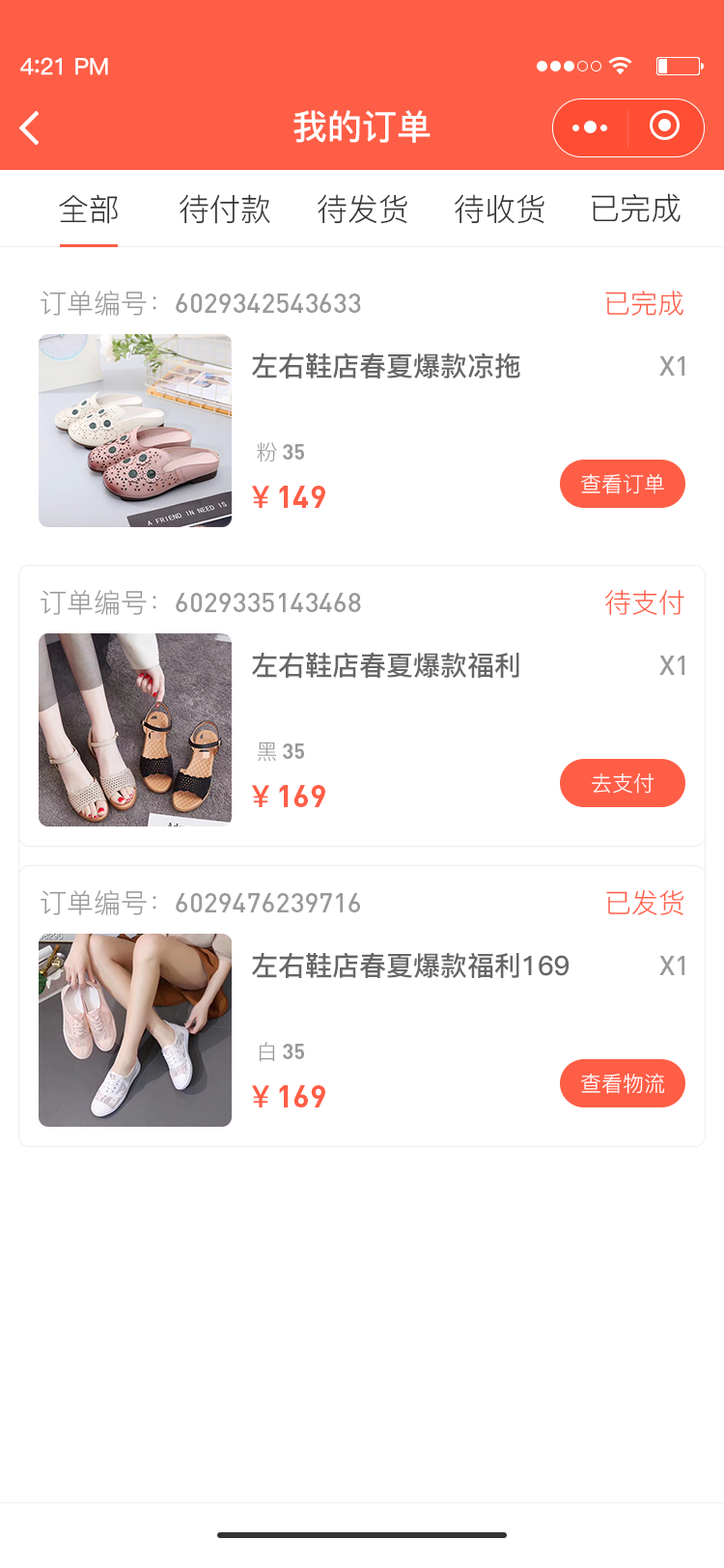
<style>
.page{position:relative;width:724px;height:1568px;background:#ffffff}
.page>*{position:absolute;margin:0}
.t1{font:23.2px "PingFang-SC-Bold";letter-spacing:-0.02em;color:#fefefe}
.t2{font:25.1px "PingFang-SC-Bold";letter-spacing:-0.02em;color:#fefefe}
.t3{font:34.8px "PingFang-SC-Bold";color:#ffffff}
.t4{font:30.9px "PingFang-SC-Regular";color:#333333}
.t5{font:27px "DIN-Medium";color:#999999}
.t6{font:27px "PingFang-SC-Regular";color:#999999}
.t7{font:27px "PingFang-SC-Regular";color:#ff5e46}
.t8{font:27px "PingFang-SC-Bold";color:#666666}
.t9{font:21.2px "PingFang-SC-Regular";color:#999999}
.t10{font:21.2px "DIN-Bold";color:#999999}
.t11{font:30.9px "DIN-Bold";color:#ff5e46}
.t12{font:30.9px "PingFang-SC-Bold";color:#ff5e46}
.t13{font:21.2px "PingFang-SC-Regular";color:#ffffff}
</style>
<div class="page">
<p class="t1" style="left:20px;top:57px;width:88px;height:18px">4<span class="t2">:</span>21 PM</p>
<p class="t3" style="left:294px;top:110px;width:137px;height:33px">我的订单</p>
<p class="t4" style="left:59px;top:194px;width:59px;height:30px">全部</p>
<p class="t4" style="left:180px;top:194px;width:90px;height:30px">待付款</p>
<p class="t4" style="left:318px;top:194px;width:89px;height:30px">待发货</p>
<p class="t4" style="left:455px;top:194px;width:90px;height:30px">待收货</p>
<p class="t4" style="left:591px;top:193px;width:90px;height:30px">已完成</p>
<p class="t5" style="left:41px;top:291px;width:320px;height:25px"><span class="t6">订单编号：</span>6029342543633</p>
<p class="t7" style="left:605px;top:290px;width:79px;height:26px">已完成</p>
<p class="t8" style="left:252px;top:352px;width:268px;height:26px">左右鞋店春夏爆款凉拖</p>
<p class="t5" style="left:659px;top:356px;width:26px;height:20px">X1</p>
<p class="t9" style="left:257px;top:442px;width:20px;height:20px">粉</p>
<p class="t10" style="left:283px;top:444px;width:21px;height:16px">35</p>
<p class="t11" style="left:252px;top:486px;width:73px;height:22px"><span class="t12">￥</span>149</p>
<p class="t13" style="left:581px;top:474px;width:83px;height:20px">查看订单</p>
<p class="t5" style="left:41px;top:590px;width:320px;height:25px"><span class="t6">订单编号：</span>6029335143468</p>
<p class="t7" style="left:605px;top:589px;width:80px;height:26px">待支付</p>
<p class="t8" style="left:252px;top:652px;width:267px;height:26px">左右鞋店春夏爆款福利</p>
<p class="t5" style="left:659px;top:656px;width:26px;height:19px">X1</p>
<p class="t9" style="left:258px;top:742px;width:18px;height:20px">黑</p>
<p class="t10" style="left:283px;top:743px;width:21px;height:16px">35</p>
<p class="t13" style="left:592px;top:773px;width:63px;height:21px">去支付</p>
<p class="t11" style="left:252px;top:785px;width:73px;height:22px"><span class="t12">￥</span>169</p>
<p class="t5" style="left:41px;top:890px;width:319px;height:25px"><span class="t6">订单编号：</span>6029476239716</p>
<p class="t7" style="left:606px;top:889px;width:78px;height:26px">已发货</p>
<p class="t8" style="left:252px;top:952px;width:317px;height:26px">左右鞋店春夏爆款福利169</p>
<p class="t5" style="left:659px;top:956px;width:26px;height:19px">X1</p>
<p class="t9" style="left:259px;top:1042px;width:16px;height:20px">白</p>
<p class="t10" style="left:283px;top:1044px;width:21px;height:15px">35</p>
<p class="t13" style="left:581px;top:1073px;width:84px;height:21px">查看物流</p>
<p class="t11" style="left:252px;top:1085px;width:73px;height:22px"><span class="t12">￥</span>169</p>
</div>
